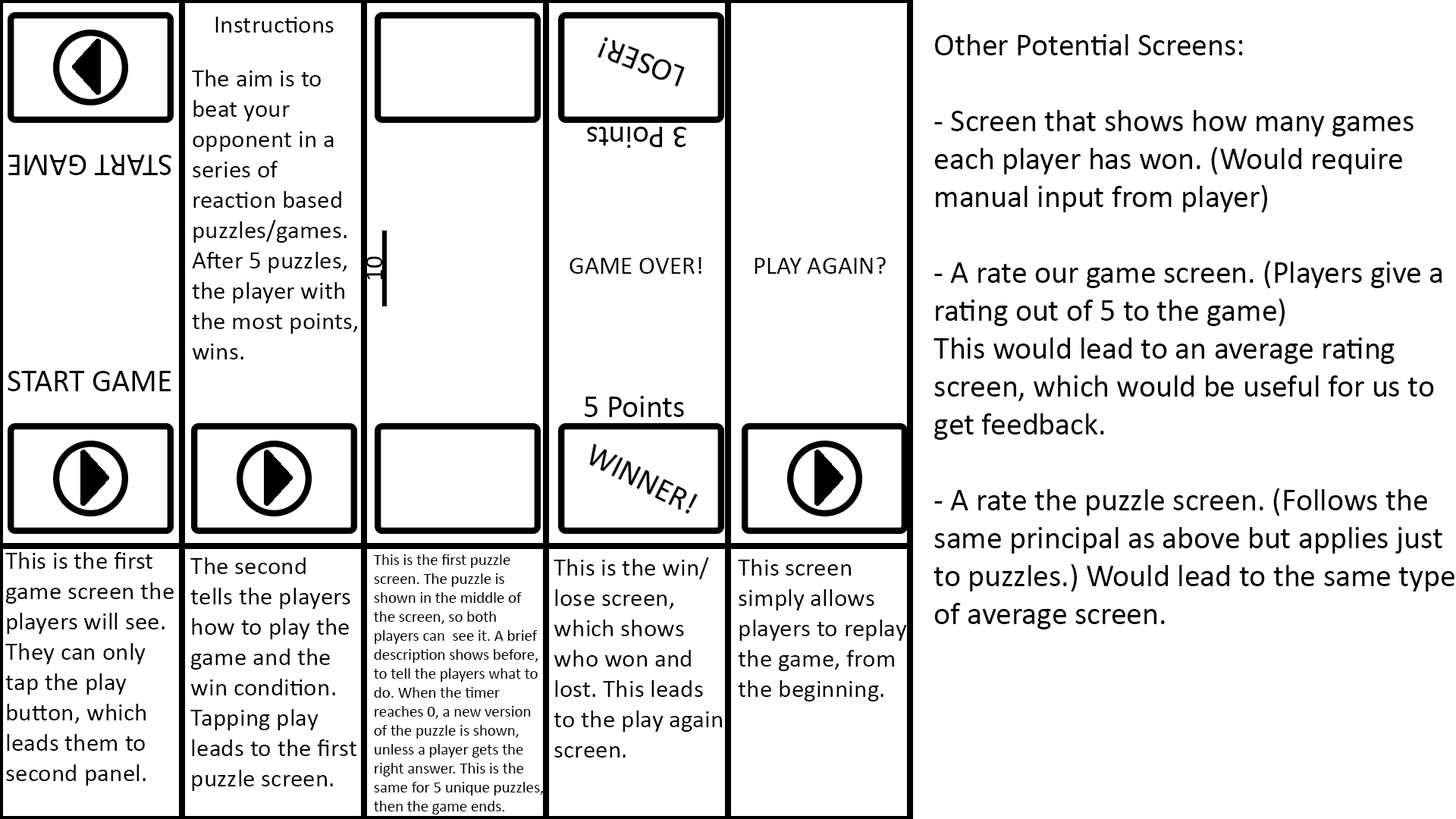
<style>
.page{position:relative;width:1456px;height:819px;background:#ffffff}
.page>*{position:absolute;margin:0}
.t1{font:25.3px "Calibri";color:#000000}
.t2{font:31.6px "Calibri";color:#000000}
.t3{font:15.8px "Calibri";color:#000000}
</style>
<div class="page">
<p class="t1" style="left:215px;top:17px;width:119px;height:16px">Instructions</p>
<p class="t2" style="left:933px;top:34px;width:521px;height:595px">Other Potential Screens:<br><br>- Screen that shows how many games<br>each player has won. (Would require<br>manual input from player)<br><br>- A rate our game screen. (Players give a<br>rating out of 5 to the game)<br>This would lead to an average rating<br>screen, which would be useful for us to<br>get feedback.<br><br>- A rate the puzzle screen. (Follows the<br>same principal as above but applies just<br>to puzzles.) Would lead to the same type<br>of average screen.</p>
<p class="t1" style="left:192px;top:70px;width:165px;height:289px">The aim is to<br>beat your <br>opponent in a<br>series of <br>reaction based<br>puzzles/games.<br>After 5 puzzles,<br>the player with<br>the most points,<br>wins.</p>
<p class="t2" style="left:587px;top:127px;width:99px;height:21px;rotate:-180deg">3 Points</p>
<p class="t2" style="left:8px;top:155px;width:163px;height:20px;rotate:180deg">START GAME</p>
<p class="t1" style="left:570px;top:257px;width:131px;height:17px">GAME OVER!</p>
<p class="t1" style="left:755px;top:257px;width:131px;height:17px">PLAY AGAIN?</p>
<p class="t2" style="left:8px;top:371px;width:163px;height:20px">START GAME</p>
<p class="t2" style="left:585px;top:396px;width:99px;height:21px">5 Points</p>
<p class="t1" style="left:5px;top:552px;width:169px;height:234px">This is the first<br>game screen the<br>players will see.<br>They can only<br>tap the play<br>button, which<br>leads them to<br>second panel.</p>
<p class="t1" style="left:190px;top:557px;width:166px;height:234px">The second<br>tells the players<br>how to play the<br>game and the<br>win condition.<br>Tapping play<br>leads to the first<br>puzzle screen.</p>
<p class="t3" style="left:373px;top:554px;width:170px;height:260px">This is the first puzzle <br>screen. The puzzle is <br>shown in the middle of <br>the screen, so both <br>players can  see it. A brief <br>description shows before, <br>to tell the players what to <br>do. When the timer <br>reaches 0, a new version <br>of the puzzle is shown, <br>unless a player gets the <br>right answer. This is the <br>same for 5 unique puzzles,<br>then the game ends.</p>
<p class="t1" style="left:554px;top:557px;width:168px;height:201px">This is the win/<br>lose screen, <br>which shows <br>who won and <br>lost. This leads<br>to the play again<br>screen.</p>
<p class="t1" style="left:738px;top:559px;width:169px;height:142px">This screen<br>simply allows<br>players to replay<br>the game, from<br>the beginning.</p>
</div>
